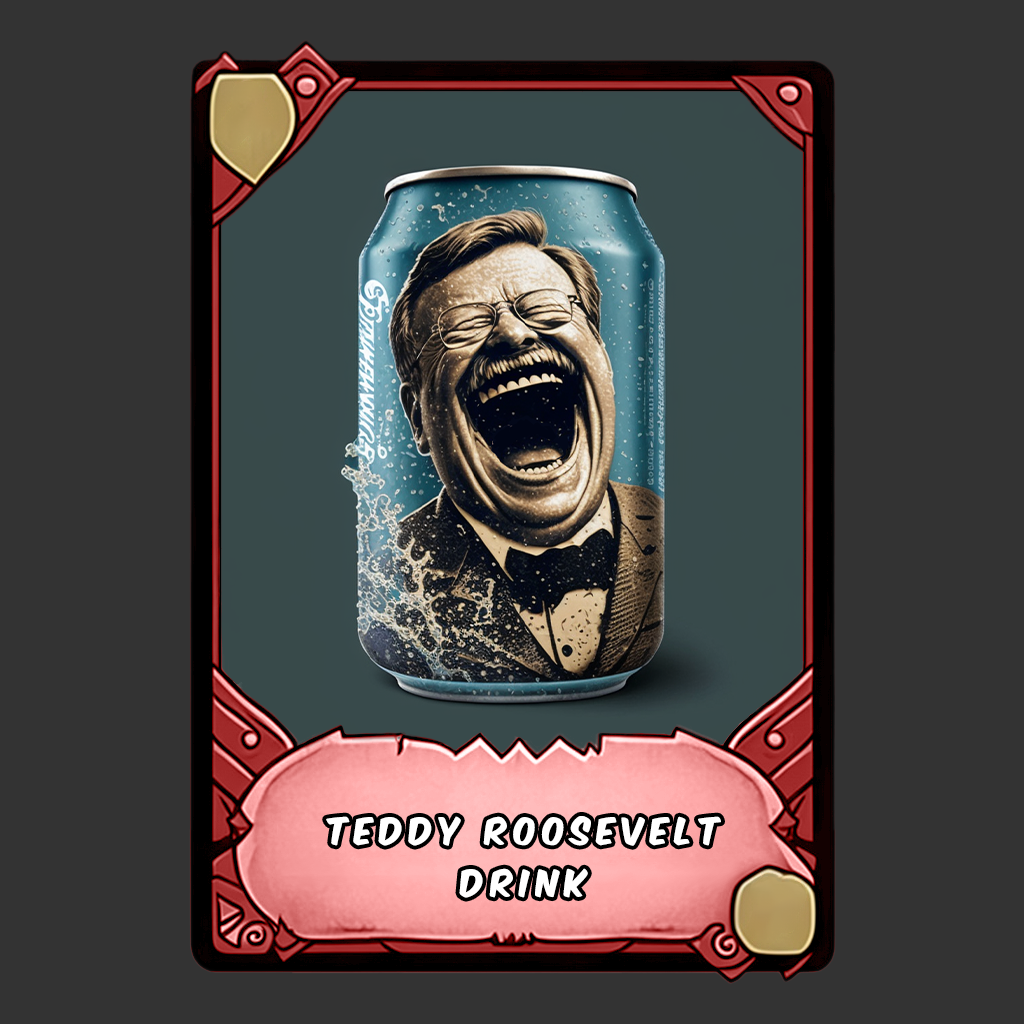
<style>
.page{position:relative;width:1024px;height:1024px;background:#333333}
.page>*{position:absolute;margin:0}
.t1{font:32px/52px "KomikaAxis";letter-spacing:0.2em;color:#ffffff}
</style>
<div class="page">
<p class="t1" style="left:326px;top:816px;width:395px;height:82px;text-align:center">teddy roosevelt drink</p>
</div>
